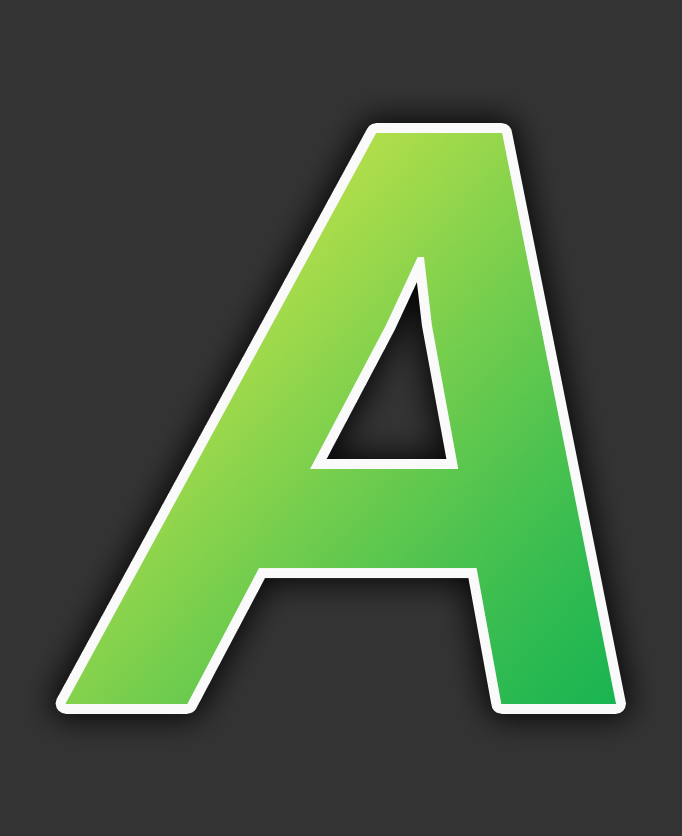
<style>
.page{position:relative;width:682px;height:836px;background:#333333}
.page>*{position:absolute;margin:0}
.t1{font:797px "ProductSans-BoldItalic";letter-spacing:-0.22em}
</style>
<div class="page">
<p class="t1" style="left:65px;top:133px;width:552px;height:571px">A</p>
</div>
